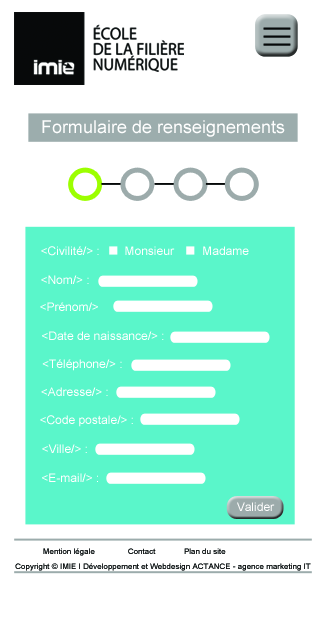
<style>
.page{position:relative;width:320px;height:640px;background:#ffffff}
.page>*{position:absolute;margin:0}
.t1{font:17.6px "ArialMT";color:#ffffff}
.t2{font:11.8px "ArialMT";color:#ffffff}
.t3{font:7.8px "ArialMT";color:#060808}
.t4{font:7.8px "ArialMT"}
</style>
<div class="page">
<p class="t1" style="left:42px;top:120px;width:243px;height:17px">Formulaire de renseignements</p>
<p class="t2" style="left:41px;top:246px;width:58px;height:10px">&lt;Civilité/&gt; :</p>
<p class="t2" style="left:125px;top:246px;width:50px;height:9px">Monsieur</p>
<p class="t2" style="left:203px;top:246px;width:46px;height:9px">Madame</p>
<p class="t2" style="left:41px;top:275px;width:48px;height:9px">&lt;Nom/&gt; :</p>
<p class="t2" style="left:40px;top:302px;width:58px;height:9px">&lt;Prénom/&gt; :</p>
<p class="t2" style="left:42px;top:331px;width:122px;height:9px">&lt;Date de naissance/&gt; :</p>
<p class="t2" style="left:42px;top:359px;width:80px;height:12px">&lt;Téléphone/&gt; :</p>
<p class="t2" style="left:41px;top:387px;width:67px;height:9px">&lt;Adresse/&gt; :</p>
<p class="t2" style="left:40px;top:415px;width:93px;height:12px">&lt;Code postale/&gt; :</p>
<p class="t2" style="left:42px;top:444px;width:45px;height:9px">&lt;Ville/&gt; :</p>
<p class="t2" style="left:42px;top:473px;width:56px;height:9px">&lt;E-mail/&gt; :</p>
<p class="t2" style="left:237px;top:502px;width:38px;height:9px">Valider</p>
<p class="t3" style="left:43px;top:548px;width:52px;height:8px">Mention légale</p>
<p class="t3" style="left:128px;top:548px;width:28px;height:6px">Contact</p>
<p class="t4" style="left:184px;top:548px;width:42px;height:6px">Plan du site</p>
<p class="t3" style="left:15px;top:563px;width:296px;height:8px">Copyright © IMIE I Développement et Webdesign ACTANCE - agence marketing IT</p>
</div>
